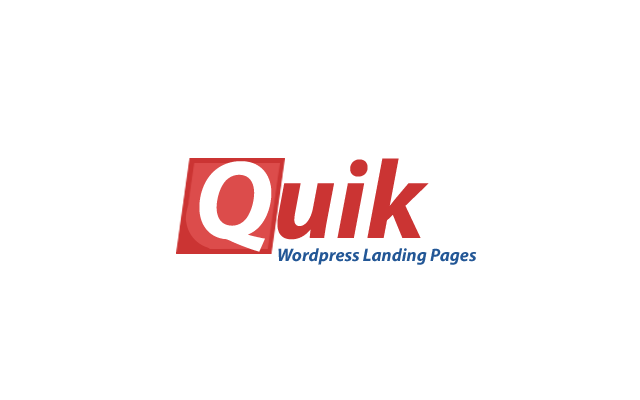
<style>
.page{position:relative;width:640px;height:400px;background:#ffffff}
.page>*{position:absolute;margin:0}
.t1{font:112px "MyriadPro-BoldIt";color:#cb3433}
.t2{font:112px "MyriadPro-BoldIt";color:#ffffff}
.t3{font:18px "MyriadPro-BoldIt";color:#235796}
</style>
<div class="page">
<p class="t1" style="left:199px;top:158px;width:230px;height:94px"><span class="t2">Q</span>uik</p>
<p class="t3" style="left:278px;top:248px;width:199px;height:17px">Wordpress Landing Pages</p>
</div>
